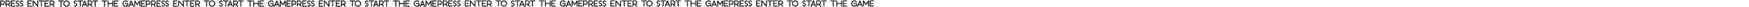
<style>
.page{position:relative;width:1749px;height:7px;background:#ffffff}
.page>*{position:absolute;margin:0}
.t1{font:9.1px "SFOrsonCasualHeavy";color:#282828}
.t2{font:8.9px "SFOrsonCasualHeavy";color:#282828;scale:1.03 1}
</style>
<div class="page">
<p class="t1" style="left:0px;top:0px;width:146px;height:7px">PRESS ENTER TO START THE GAME</p>
<p class="t1" style="left:146px;top:0px;width:145px;height:7px">PRESS ENTER TO START THE GAME</p>
<p class="t1" style="left:291px;top:0px;width:146px;height:7px">PRESS ENTER TO START THE GAME</p>
<p class="t2" style="left:437px;top:0px;width:146px;height:7px">PRESS ENTER TO START THE GAME</p>
<p class="t2" style="left:583px;top:0px;width:146px;height:7px">PRESS ENTER TO START THE GAME</p>
<p class="t2" style="left:729px;top:0px;width:145px;height:7px">PRESS ENTER TO START THE GAME</p>
</div>
